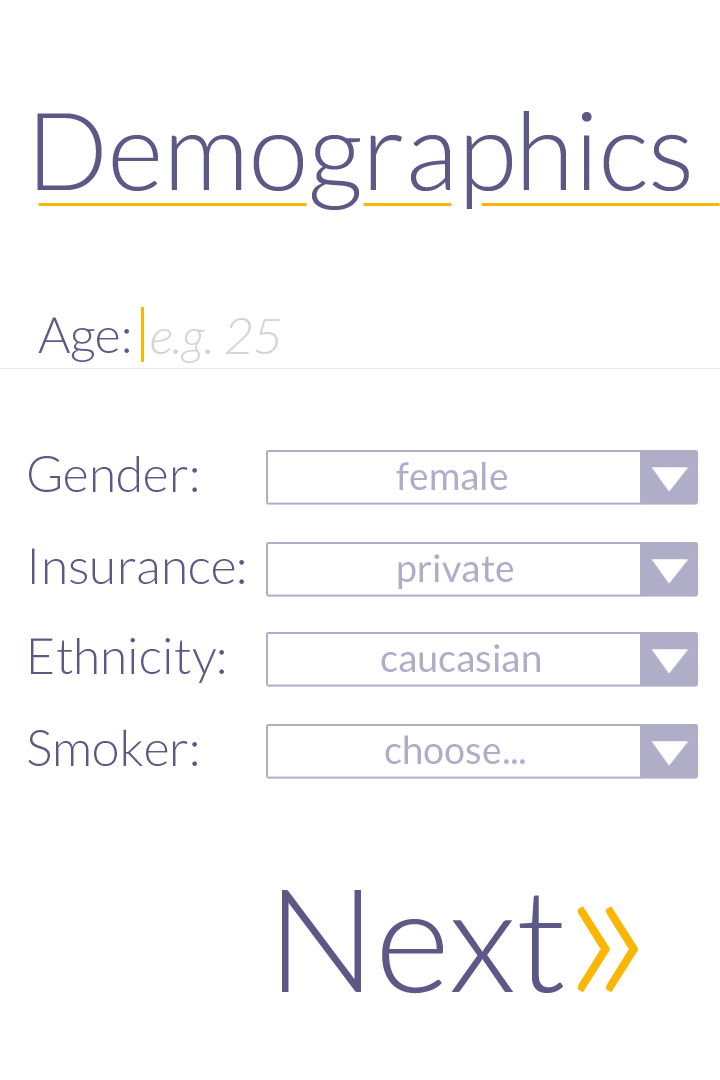
<style>
.page{position:relative;width:720px;height:1080px;background:#ffffff}
.page>*{position:absolute;margin:0}
.t1{font:108px "Lato-Light";color:#5c5987}
.t2{font:50px "Lato-Light";color:#5c5987}
.t3{font:50px "Lato-LightItalic";color:#d4d4d4}
.t4{font:38px "Lato-Regular";color:#afadc8}
.t5{font:144px "Lato-Light";color:#5c5987}
.t6{font:222px "Lato-Light";color:#f9b704}
</style>
<div class="page">
<p class="t1" style="left:37px;top:111px;width:652px;height:99px">Demographics</p>
<p class="t2" style="left:38px;top:317px;width:91px;height:45px">Age:</p>
<p class="t3" style="left:151px;top:318px;width:129px;height:45px">e.g. 25</p>
<p class="t2" style="left:29px;top:456px;width:168px;height:36px">Gender:</p>
<p class="t4" style="left:396px;top:462px;width:111px;height:28px">female</p>
<p class="t2" style="left:32px;top:548px;width:212px;height:36px">Insurance:</p>
<p class="t4" style="left:398px;top:554px;width:115px;height:35px">private</p>
<p class="t2" style="left:31px;top:638px;width:193px;height:45px">Ethnicity:</p>
<p class="t4" style="left:381px;top:644px;width:159px;height:28px">caucasian</p>
<p class="t2" style="left:28px;top:729px;width:169px;height:37px">Smoker:</p>
<p class="t4" style="left:385px;top:735px;width:140px;height:29px">choose...</p>
<p class="t5" style="left:282px;top:890px;width:281px;height:104px">Next</p>
<p class="t6" style="left:577px;top:906px;width:61px;height:86px">»</p>
</div>
